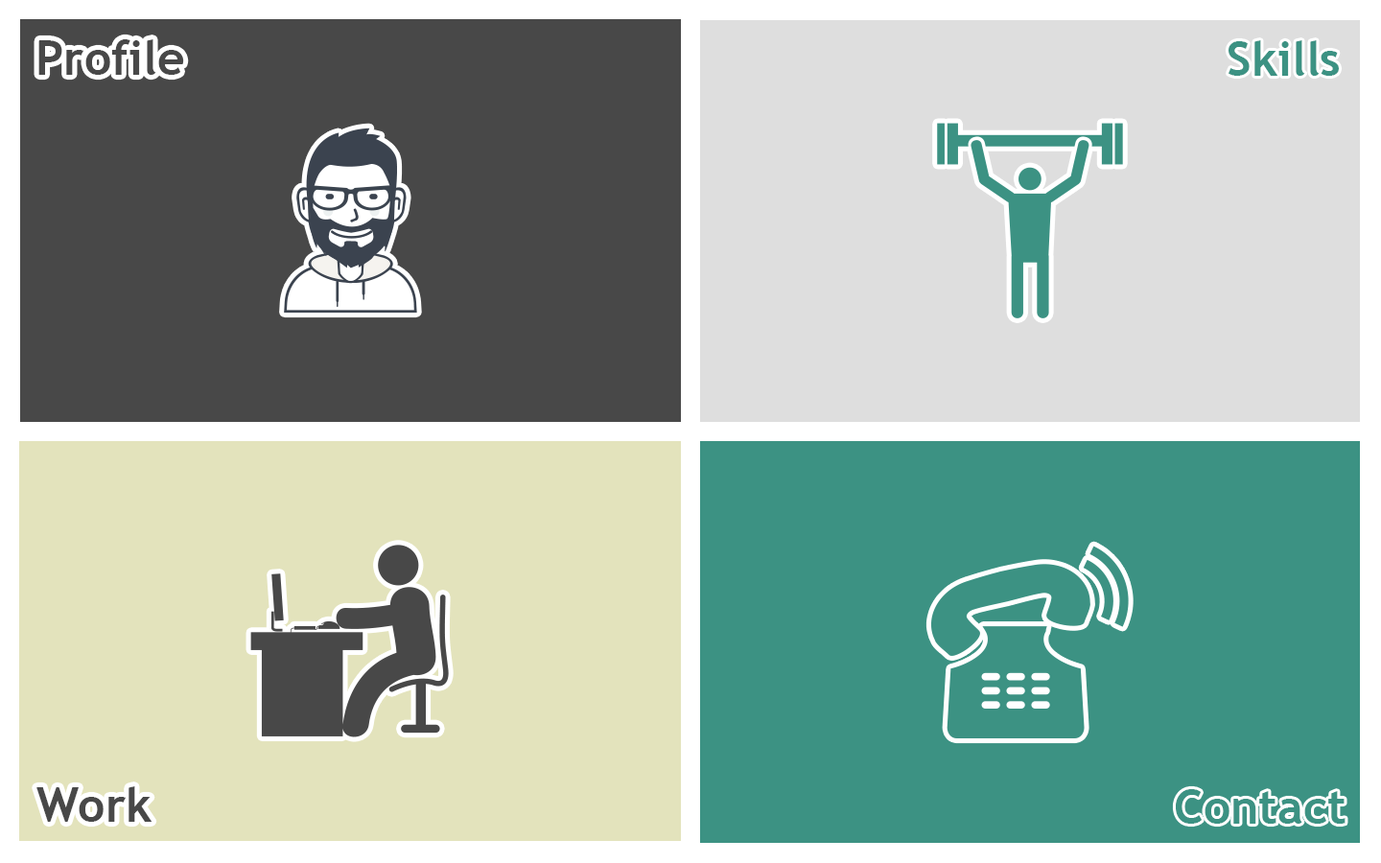
<style>
.page{position:relative;width:1381px;height:863px;background:#484848}
.page>*{position:absolute;margin:0}
.t1{font:48px "TrebuchetMS-Bold";color:#484848}
.t2{font:48px "TrebuchetMS-Bold";color:#484848;text-transform:uppercase}
.t3{font:48px "TrebuchetMS-Bold";color:#3c9283}
.t4{font:48px "TrebuchetMS-Bold";color:#3c9283;text-transform:uppercase}
</style>
<div class="page">
<p class="t1" style="left:38px;top:39px;width:146px;height:36px"><span class="t2">p</span>rofile</p>
<p class="t3" style="left:1229px;top:40px;width:110px;height:36px"><span class="t4">s</span>kills</p>
<p class="t1" style="left:36px;top:787px;width:117px;height:35px"><span class="t2">w</span>ork</p>
<p class="t3" style="left:1176px;top:789px;width:170px;height:35px"><span class="t4">c</span>ontact</p>
</div>
